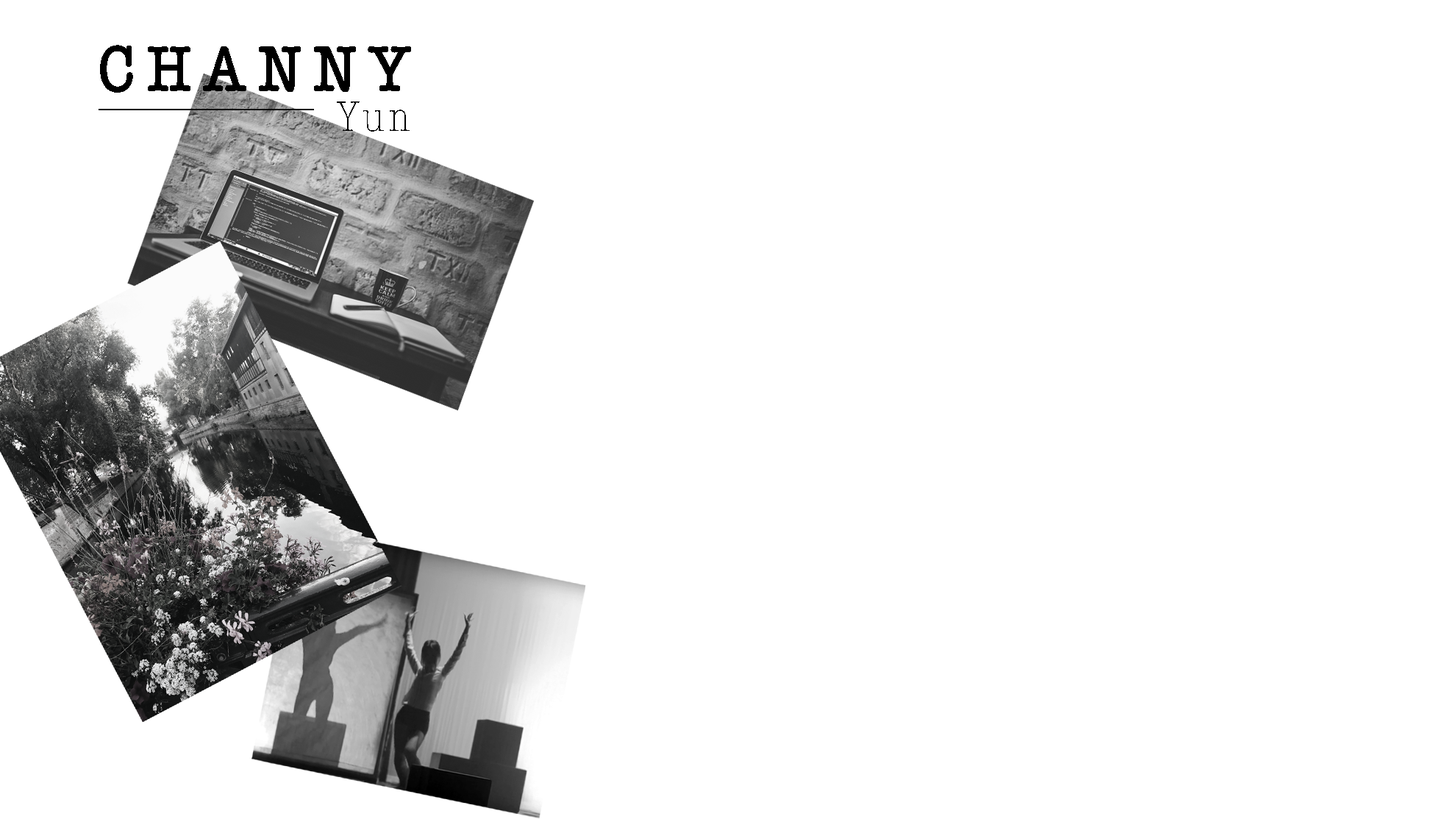
<style>
.page{position:relative;width:1456px;height:819px;background:#ffffff}
.page>*{position:absolute;margin:0}
.t1{font:66.8px "AmericanTypewriter-Semibold";letter-spacing:0.2em;color:#000000;text-decoration:underline;scale:0.86 1}
.t2{font:66.8px "AmericanTypewriter-Semibold";letter-spacing:0.2em;color:#000000;scale:0.86 1}
.t3{font:44.1px "AmericanTypewriter-CondensedLight";letter-spacing:0.1em;color:#000000}
</style>
<div class="page">
<p class="t1" style="left:99px;top:45px;width:312px;height:65px">CHAN<span class="t2">NY</span></p>
<p class="t3" style="left:337px;top:101px;width:73px;height:31px">Yun</p>
</div>
